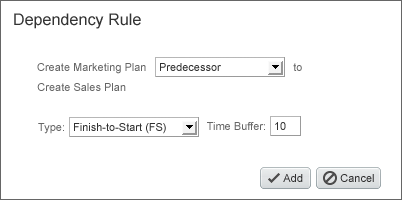
<style>
.page{position:relative;width:402px;height:200px;background:#ffffff}
.page>*{position:absolute;margin:0}
.t1{font:16px "ArialMT";letter-spacing:0.005em;color:#333333}
.t2{font:11px "ArialMT";color:#666666}
.t3{font:11px "ArialMT";color:#303030}
</style>
<div class="page">
<p class="t1" style="left:14px;top:13px;width:127px;height:16px">Dependency Rule</p>
<p class="t2" style="left:37px;top:63px;width:265px;height:11px">Create Marketing Plan                                                to</p>
<p class="t3" style="left:160px;top:63px;width:61px;height:8px">Predecessor</p>
<p class="t2" style="left:37px;top:83px;width:89px;height:8px">Create Sales Plan</p>
<p class="t2" style="left:38px;top:123px;width:26px;height:11px">Type:</p>
<p class="t3" style="left:74px;top:123px;width:92px;height:11px">Finish-to-Start (FS)</p>
<p class="t2" style="left:207px;top:122px;width:58px;height:8px">Time Buffer:</p>
<p class="t3" style="left:275px;top:122px;width:11px;height:8px">10</p>
<p class="t3" style="left:283px;top:174px;width:20px;height:8px">Add</p>
<p class="t3" style="left:340px;top:174px;width:34px;height:8px">Cancel</p>
</div>
